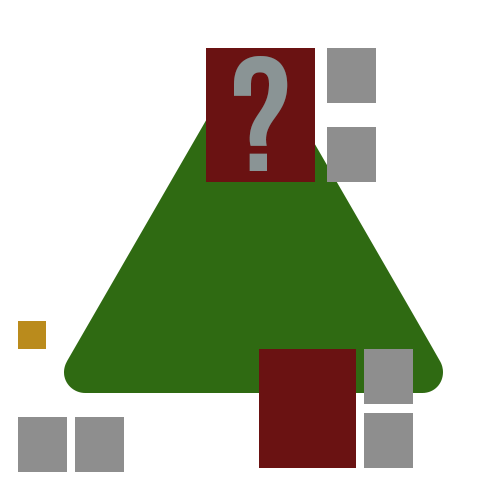
<style>
.page{position:relative;width:500px;height:500px;background:#ffffff}
.page>*{position:absolute;margin:0}
.t1{font:163px "BebasNeue-Bold";color:#8a9495}
</style>
<div class="page">
<p class="t1" style="left:234px;top:56px;width:54px;height:115px">?</p>
</div>
